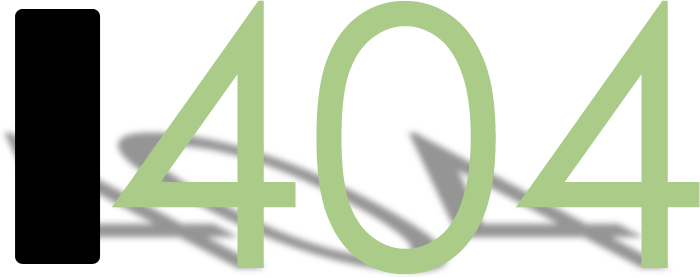
<style>
.page{position:relative;width:700px;height:278px;background:#ffffff}
.page>*{position:absolute;margin:0}
.t1{font:363.5px "CenturyGothic";color:#aacc88}
</style>
<div class="page">
<p class="t1" style="left:112px;top:0px;width:588px;height:274px">404</p>
</div>
